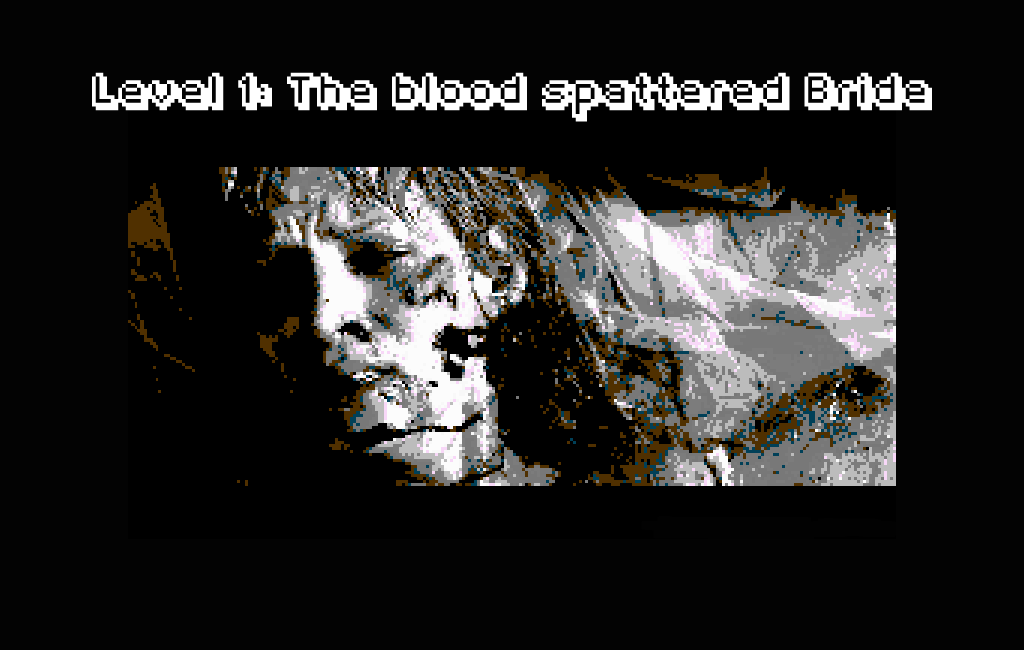
<style>
.page{position:relative;width:1024px;height:650px;background:#030303}
.page>*{position:absolute;margin:0}
.t1{font:30px "Fipps-Regular";color:#ffffff}
</style>
<div class="page">
<p class="t1" style="left:92px;top:72px;width:840px;height:50px">Level 1: The blood spattered Bride</p>
</div>
